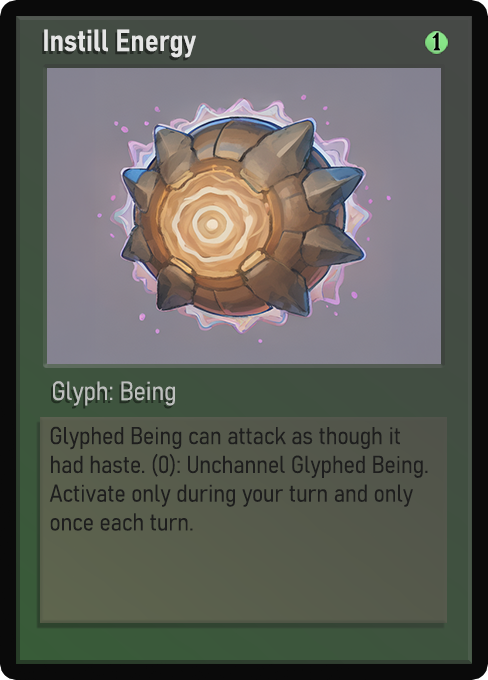
<style>
.page{position:relative;width:488px;height:680px}
.page>*{position:absolute;margin:0}
.t1{font:30px "Bahnschrift-SemiBoldSemiCondensed";color:#f2f2f2;font-weight:bold}
.t2{font:25px "WTRRoycroft";color:#000000;font-weight:bold;scale:1.09 1}
.t3{font:26px "Bahnschrift-LightSemiCondensed";color:#c8c8c8;font-weight:bold}
.t4{font:24px "Bahnschrift-LightSemiCondensed";color:#1e1e1e;font-weight:bold}
</style>
<div class="page">
<p class="t1" style="left:44px;top:29px;width:152px;height:29px;opacity:0.9">Instill Energy</p>
<p class="t2" style="left:432px;top:32px;width:9px;height:19px">1</p>
<p class="t3" style="left:53px;top:381px;width:122px;height:25px;opacity:0.9">Glyph: Being</p>
<p class="t4" style="left:49px;top:426px;width:379px;height:105px">Glyphed Being can attack as though it had haste. (0): Unchannel Glyphed Being. Activate only during your turn and only once each turn.</p>
</div>
